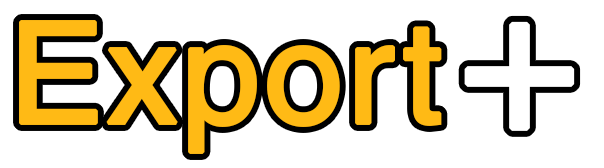
<style>
.page{position:relative;width:604px;height:168px;background:#ffffff}
.page>*{position:absolute;margin:0}
.t1{font:141.2px "HelveticaCE";color:#ffba15;font-weight:bold}
</style>
<div class="page">
<p class="t1" style="left:19px;top:20px;width:423px;height:134px">Export</p>
</div>
